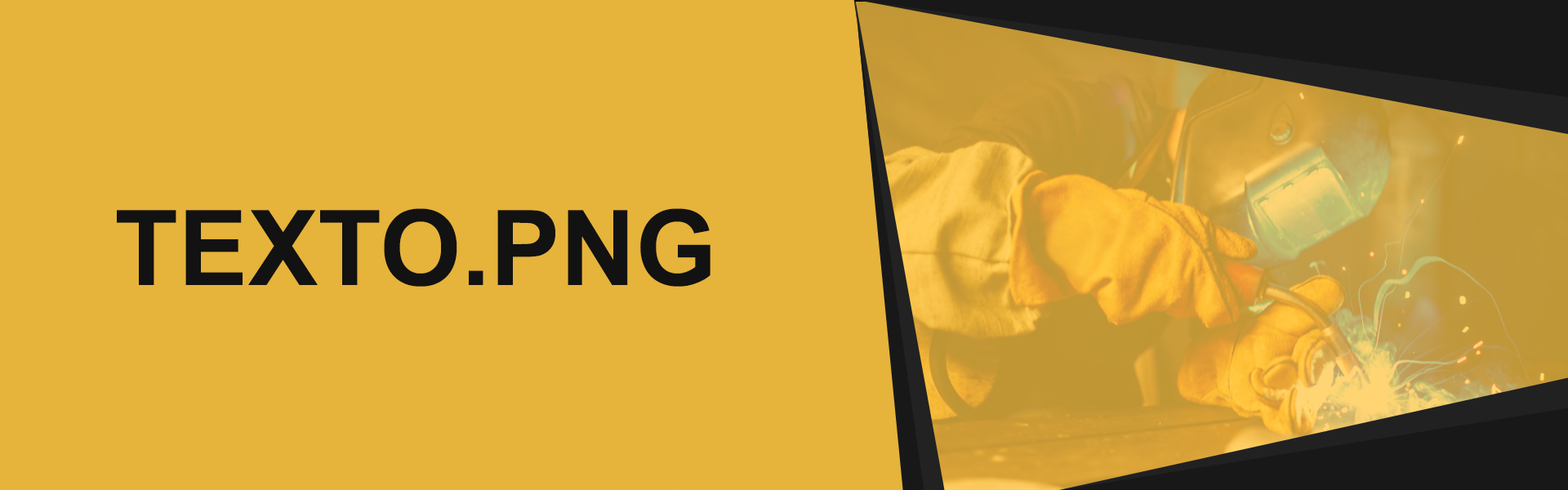
<style>
.page{position:relative;width:1568px;height:490px;background:#e6b33b}
.page>*{position:absolute;margin:0}
.t1{font:104.5px "Arial-BoldMT";color:#121212}
</style>
<div class="page">
<p class="t1" style="left:117px;top:208px;width:593px;height:79px">TEXTO.PNG</p>
</div>
